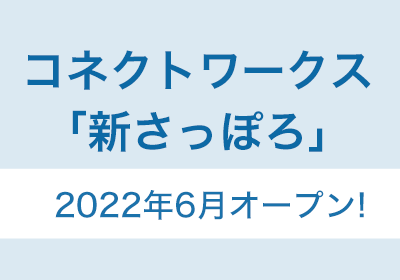
<style>
.page{position:relative;width:400px;height:280px;background:#dbe9f2}
.page>*{position:absolute;margin:0}
.t1{font:44px/61px "HiraKakuStd-W6";color:#0c69a5}
.t2{font:32px "HiraKakuStd-W5";color:#1b72ab}
</style>
<div class="page">
<p class="t1" style="left:27px;top:50px;width:344px;height:102px;text-align:center">コネクトワークス<br>「新さっぽろ」</p>
<p class="t2" style="left:55px;top:190px;width:309px;height:30px">2022年6月オープン!</p>
</div>
